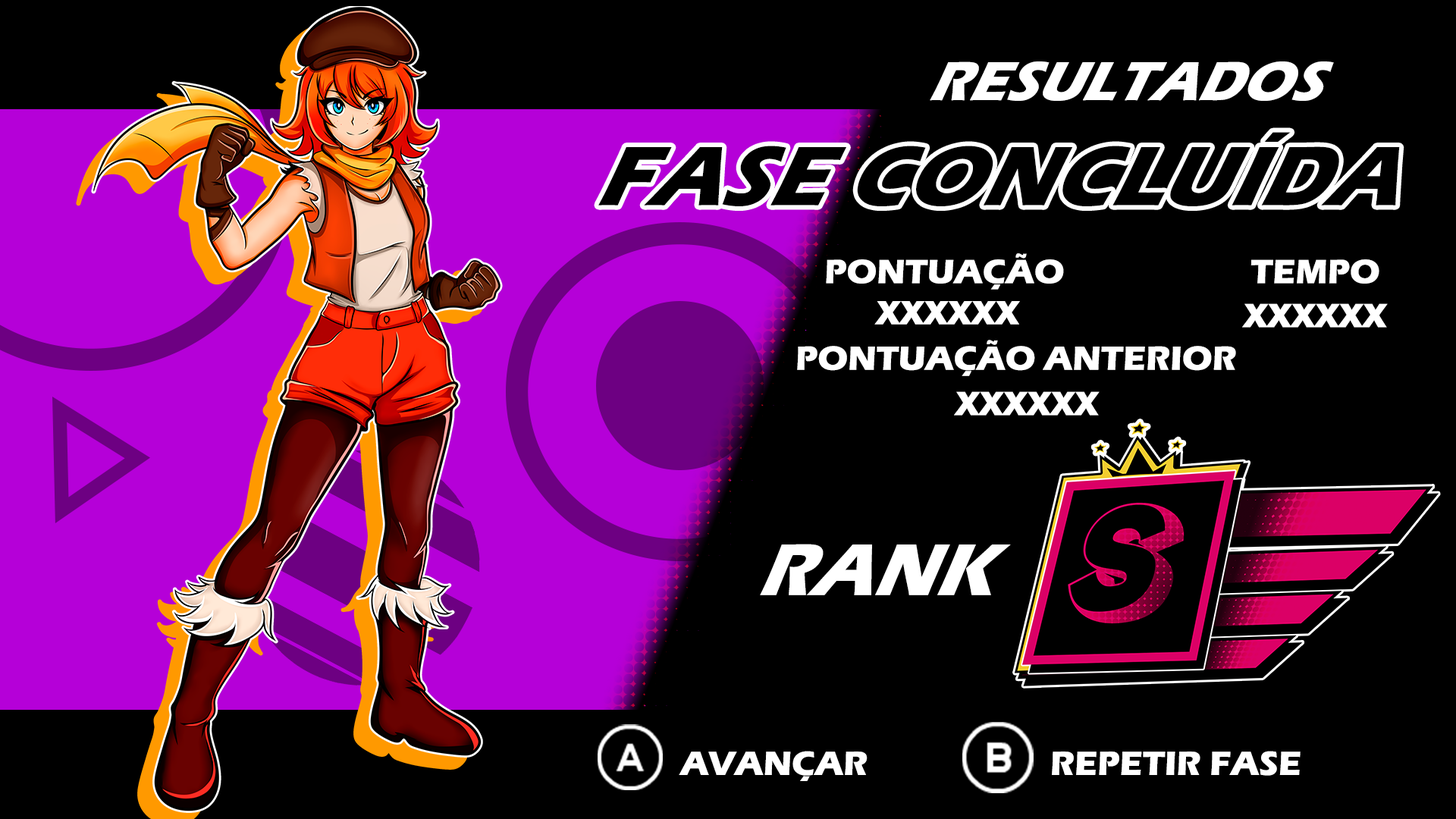
<style>
.page{position:relative;width:1456px;height:819px;background:#000000}
.page>*{position:absolute;margin:0}
.t1{font:62px "ErasITC-Bold";color:#ffffff;scale:0.92 1}
.t2{font:94.8px "ErasITC-Bold";color:#000000;scale:0.92 1}
.t3{font:34.8px "ErasITC-Bold";color:#ffffff}
.t4{font:81.2px "ErasITC-Bold";color:#ffffff;scale:0.93 1}
</style>
<div class="page">
<p class="t1" style="left:930px;top:61px;width:404px;height:40px">RESULTADOS</p>
<p class="t2" style="left:598px;top:132px;width:802px;height:74px">FASE CONCLUÍDA</p>
<p class="t3" style="left:826px;top:253px;width:238px;height:37px">PONTUAÇÃO</p>
<p class="t3" style="left:1250px;top:259px;width:129px;height:25px">TEMPO</p>
<p class="t3" style="left:874px;top:301px;width:146px;height:24px">XXXXXX</p>
<p class="t3" style="left:1242px;top:303px;width:146px;height:25px">XXXXXX</p>
<p class="t3" style="left:797px;top:340px;width:439px;height:36px">PONTUAÇÃO ANTERIOR</p>
<p class="t3" style="left:954px;top:391px;width:146px;height:25px">XXXXXX</p>
<p class="t4" style="left:760px;top:544px;width:251px;height:51px">RANK</p>
<p class="t3" style="left:679px;top:751px;width:622px;height:30px">AVANÇAR                     REPETIR FASE</p>
</div>
